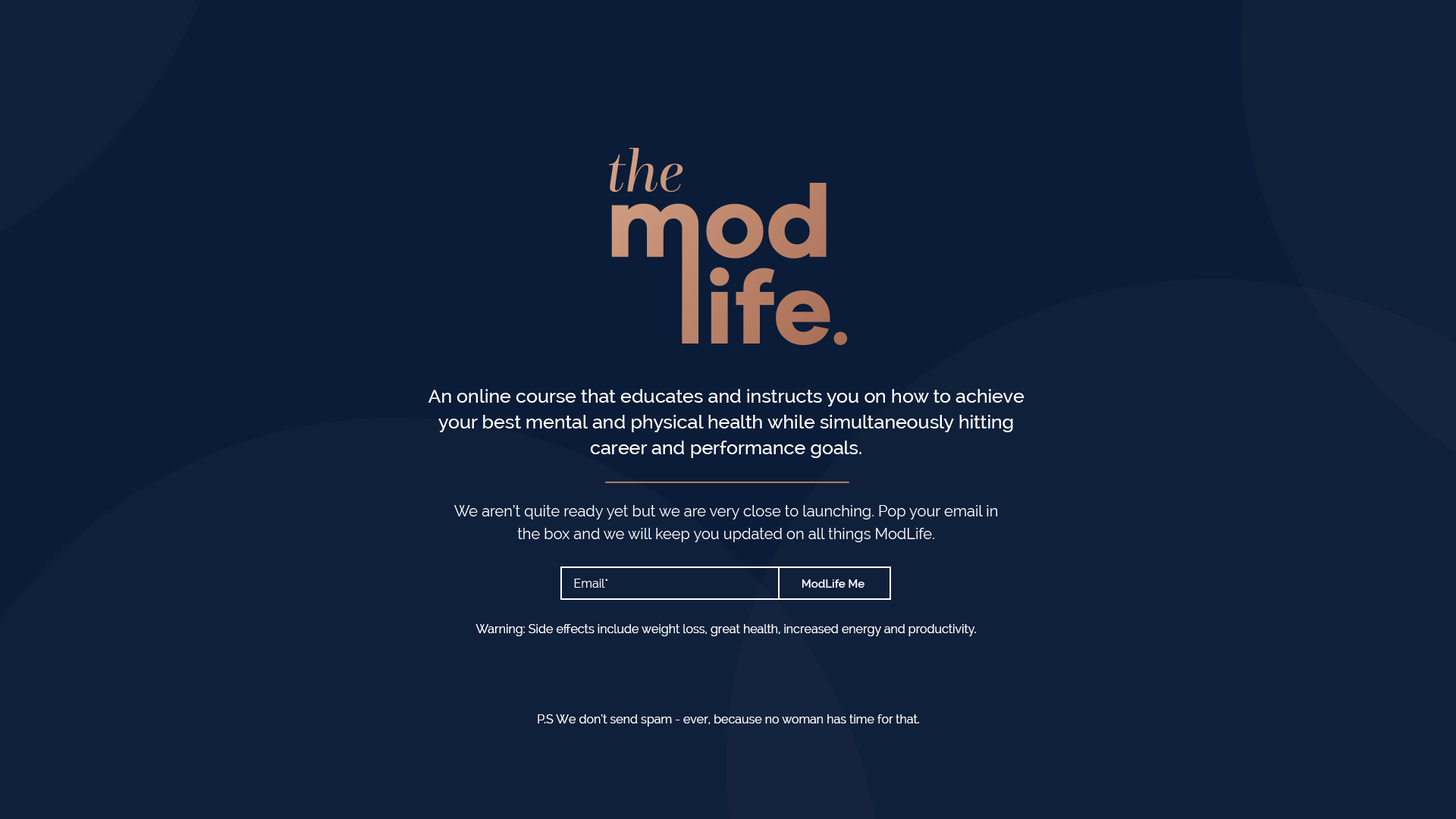
<style>
.page{position:relative;width:1456px;height:819px;background:#0f203b}
.page>*{position:absolute;margin:0}
.t1{font:19px/25.8px "Raleway-Medium";color:#ffffff}
.t2{font:15.2px/22.7px "Raleway-Regular";color:#ffffff}
.t3{font:12.1px "Raleway-Regular";color:#ffffff}
.t4{font:11.4px "Raleway-SemiBold";color:#ffffff}
.t5{font:12.1px "Raleway";color:#ffffff}
</style>
<div class="page">
<p class="t1" style="left:428px;top:389px;width:596px;height:69px;text-align:center">An online course that educates and instructs you on how to achieve your best mental and physical health while simultaneously hitting career and performance goals.</p>
<p class="t2" style="left:454px;top:505px;width:544px;height:37px;text-align:center">We aren’t quite ready yet but we are very close to launching. Pop your email in the box and we will keep you updated on all things ModLife.</p>
<p class="t3" style="left:574px;top:579px;width:34px;height:9px">Email*</p>
<p class="t4" style="left:802px;top:579px;width:62px;height:9px">ModLife Me</p>
<p class="t5" style="left:475px;top:624px;width:501px;height:12px">Warning: Side effects include weight loss, great health, increased energy and productivity.</p>
<p class="t5" style="left:538px;top:714px;width:381px;height:12px">P.S We don’t send spam - ever, because no woman has time for that.</p>
</div>
